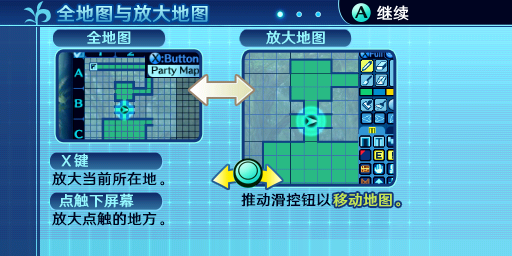
<style>
.page{position:relative;width:512px;height:256px}
.page>*{position:absolute;margin:0}
.t1{font:18.7px "HYWenHei-FEW";letter-spacing:0.025em}
.t2{font:14.7px "HYWenHei-FEW";letter-spacing:0.025em;color:#94f7ff}
.t3{font:14.7px "HYWenHei-FEW";letter-spacing:0.025em;color:#000421}
.t4{font:14.7px "HYWenHei-FEW";letter-spacing:0.025em;color:#c6e752}
</style>
<div class="page">
<p class="t1" style="left:57px;top:5px;width:151px;height:17px">全地图与放大地图</p>
<p class="t2" style="left:266px;top:30px;width:59px;height:15px">放大地图</p>
<p class="t2" style="left:87px;top:31px;width:44px;height:13px">全地图</p>
<p class="t2" style="left:61px;top:153px;width:27px;height:15px">Ｘ键</p>
<p class="t3" style="left:52px;top:171px;width:113px;height:15px">放大当前所在地。</p>
<p class="t2" style="left:59px;top:193px;width:75px;height:15px">点触下屏幕</p>
<p class="t3" style="left:241px;top:192px;width:90px;height:15px">推动滑控钮以</p>
<p class="t4" style="left:333px;top:193px;width:68px;height:14px">移动地图。</p>
<p class="t3" style="left:52px;top:211px;width:113px;height:15px">放大点触的地方。</p>
</div>
